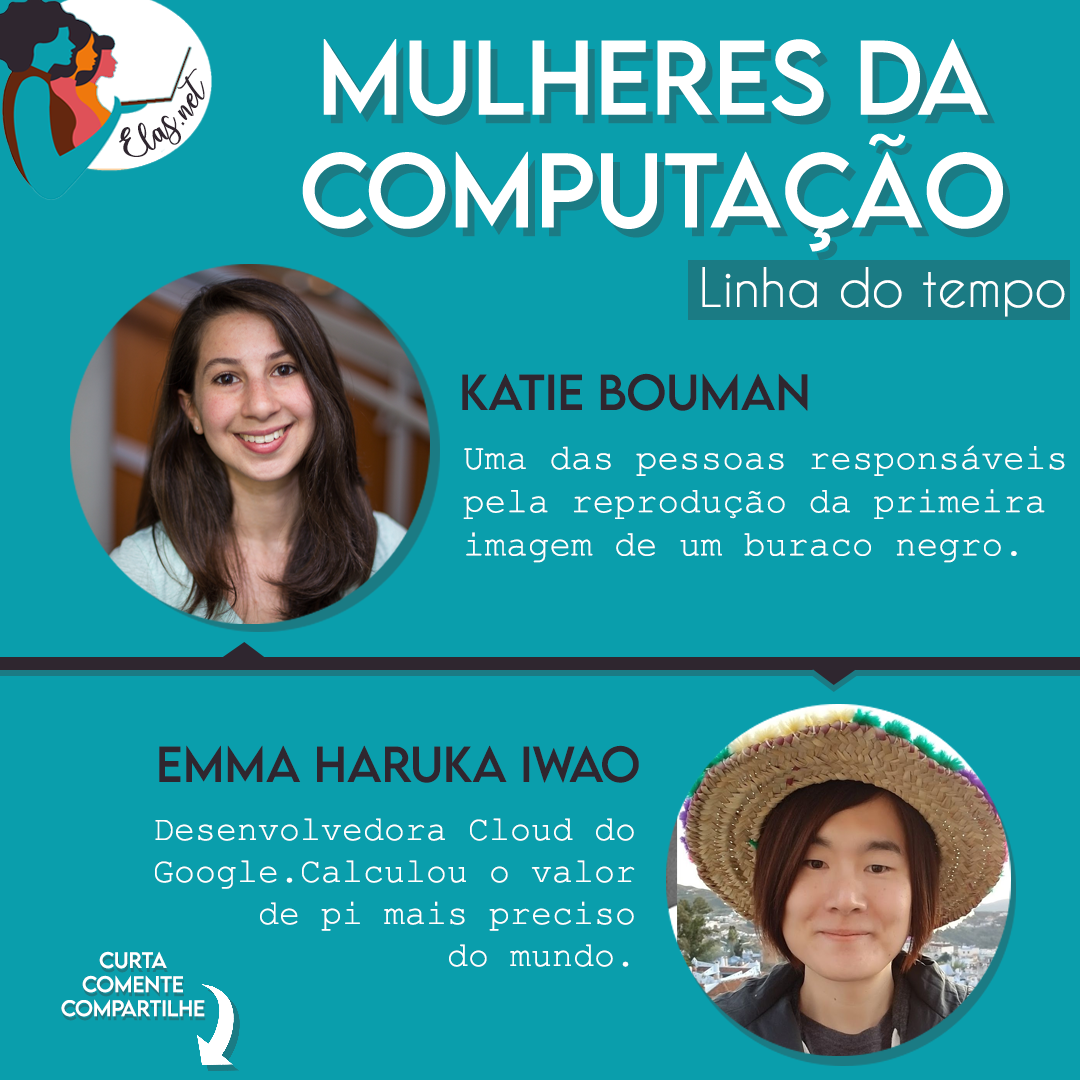
<style>
.page{position:relative;width:1080px;height:1080px;background:#0a9eac}
.page>*{position:absolute;margin:0}
.t1{font:25px "charlinda-Regular";color:#2f262f;scale:1.18 1}
.t2{font:51px "CaviarDreams";color:#ffffff}
.t3{font:45px "LEMONMILK-Regular";color:#2f262f}
.t4{font:36px "CourierNewPSMT";color:#ffffff}
.t5{font:35px "CourierNewPSMT";color:#ffffff}
.t6{font:20px "LEMONMILK-Regular";color:#ffffff}
</style>
<div class="page">
<p class="t1" style="left:119px;top:68px;width:86px;height:89px;rotate:-43deg">Elas.net</p>
<p class="t2" style="left:702px;top:267px;width:363px;height:50px">Linha do tempo</p>
<p class="t3" style="left:462px;top:373px;width:346px;height:38px">Katie Bouman</p>
<p class="t4" style="left:463px;top:445px;width:602px;height:118px">Uma das pessoas responsáveis <br>pela reprodução da primeira <br>imagem de um buraco negro.</p>
<p class="t3" style="left:159px;top:745px;width:480px;height:38px">Emma Haruka Iwao</p>
<p class="t5" style="left:155px;top:818px;width:480px;height:149px;text-align:right">Desenvolvedora Cloud do<br>Google.Calculou o valor<br>de pi mais preciso<br>do mundo.</p>
<p class="t6" style="left:61px;top:951px;width:144px;height:66px;text-align:center">Curta<br>Comente<br>Compartilhe</p>
</div>
